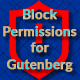
<style>
.page{position:relative;width:80px;height:80px}
.page>*{position:absolute;margin:0}
.t1{font:13.3px "Lato-Bold";font-weight:bold}
</style>
<div class="page">
<p class="t1" style="left:3px;top:9px;width:74px;height:63px;text-align:center">Block<br>Permissions<br>for<br>Gutenberg</p>
</div>
